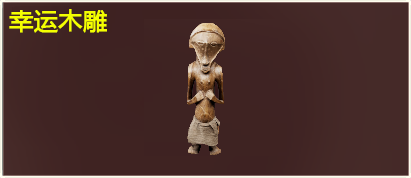
<style>
.page{position:relative;width:411px;height:178px}
.page>*{position:absolute;margin:0}
.t1{font:24px "MicrosoftYaHei";color:#f4ff00;font-weight:bold}
</style>
<div class="page">
<p class="t1" style="left:9px;top:9px;width:98px;height:24px">幸运木雕</p>
</div>
